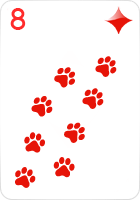
<style>
.page{position:relative;width:140px;height:200px;background:#ffffff}
.page>*{position:absolute;margin:0}
.t1{font:26px "CardCharacters";color:#ff2b2b}
</style>
<div class="page">
<p class="t1" style="left:10px;top:8px;width:16px;height:22px">8</p>
</div>
